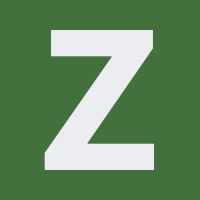
<style>
.page{position:relative;width:200px;height:200px;background:#42713e}
.page>*{position:absolute;margin:0}
.t1{font:208.3px "MyriadPro-Bold";color:#ecedf1}
</style>
<div class="page">
<p class="t1" style="left:44px;top:30px;width:110px;height:140px">Z</p>
</div>
